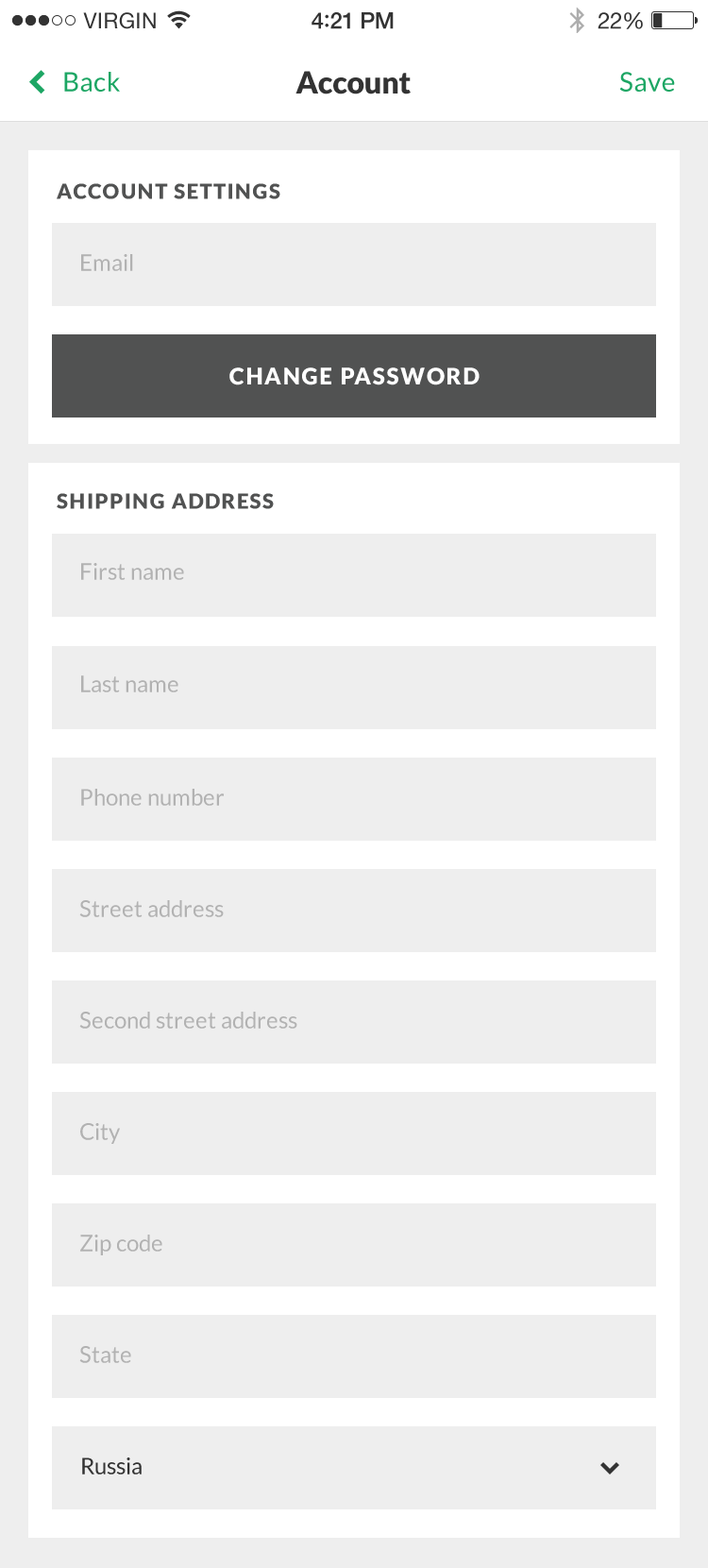
<style>
.page{position:relative;width:708px;height:1568px;background:#eeeeee}
.page>*{position:absolute;margin:0}
.t1{font:26.4px "Lato-Regular";letter-spacing:0.02em;color:#1da664}
.t2{font:30.2px "Lato-Black";letter-spacing:-0.02em;color:#333333}
.t3{font:20.8px "Lato-Black";letter-spacing:0.07em;color:#515252}
.t4{font:22.7px "Lato-Regular";color:#b2b2b2}
.t5{font:22.7px "Lato-Black";letter-spacing:0.07em;color:#ffffff}
.t6{font:22.7px "Lato-Regular";color:#333333}
</style>
<div class="page">
<p class="t1" style="left:64px;top:72px;width:56px;height:20px">Back</p>
<p class="t2" style="left:296px;top:71px;width:115px;height:23px">Account</p>
<p class="t1" style="left:620px;top:72px;width:55px;height:20px">Save</p>
<p class="t3" style="left:57px;top:183px;width:224px;height:16px">ACCOUNT SETTINGS</p>
<p class="t4" style="left:81px;top:254px;width:52px;height:17px">Email</p>
<p class="t5" style="left:230px;top:367px;width:250px;height:18px">CHANGE PASSWORD</p>
<p class="t3" style="left:57px;top:493px;width:217px;height:16px">SHIPPING ADDRESS</p>
<p class="t4" style="left:81px;top:563px;width:103px;height:17px">First name</p>
<p class="t4" style="left:81px;top:675px;width:98px;height:17px">Last name</p>
<p class="t4" style="left:81px;top:789px;width:143px;height:17px">Phone number</p>
<p class="t4" style="left:79px;top:900px;width:145px;height:17px">Street address</p>
<p class="t4" style="left:79px;top:1012px;width:219px;height:17px">Second street address</p>
<p class="t4" style="left:80px;top:1123px;width:40px;height:21px">City</p>
<p class="t4" style="left:80px;top:1235px;width:82px;height:20px">Zip code</p>
<p class="t4" style="left:79px;top:1346px;width:52px;height:17px">State</p>
<p class="t6" style="left:82px;top:1457px;width:60px;height:17px">Russia</p>
</div>
